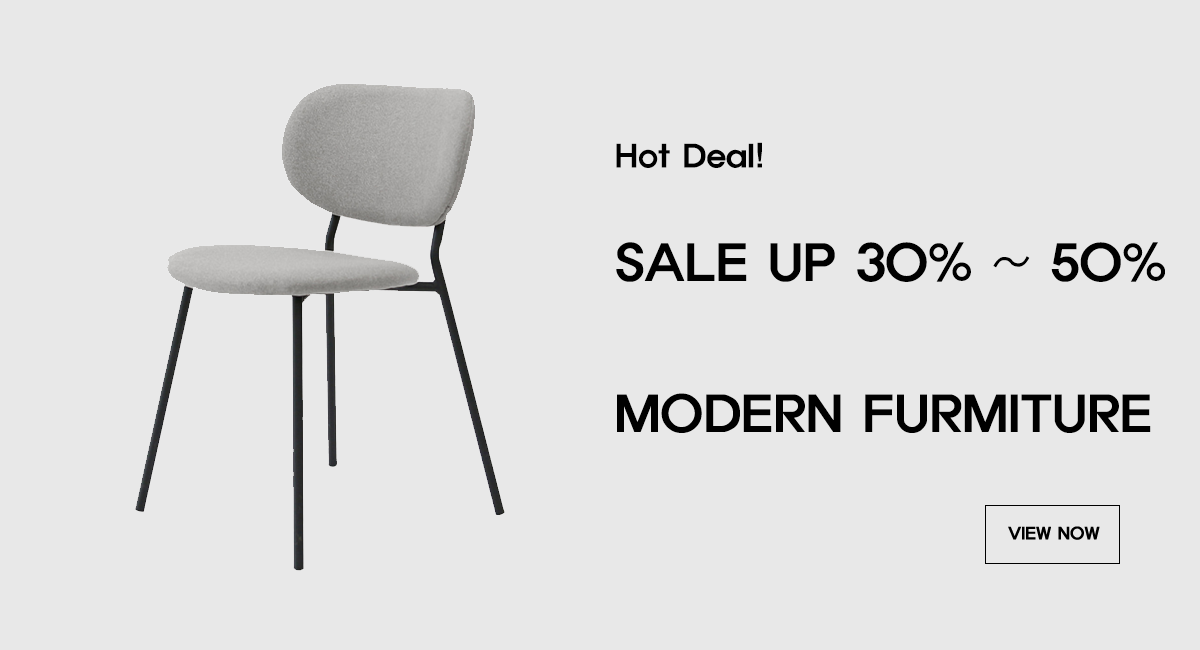
<style>
.page{position:relative;width:1200px;height:650px;background:#e8e8e8}
.page>*{position:absolute;margin:0}
.t1{font:30px "ExpoM-HM";letter-spacing:0.01em;color:#000000}
.t2{font:48px "ExpoM-HM";letter-spacing:0.01em;color:#000000}
</style>
<div class="page">
<p class="t1" style="left:616px;top:142px;width:146px;height:26px">Hot Deal!</p>
<p class="t2" style="left:616px;top:242px;width:549px;height:40px">SALE UP 30% ~ 50%</p>
<p class="t2" style="left:617px;top:393px;width:534px;height:40px">MODERN FURMITURE</p>
</div>
